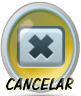
<style>
.page{position:relative;width:81px;height:96px}
.page>*{position:absolute;margin:0}
.t1{font:18px "Freehand575BT-RegularB";color:#000000;font-weight:bold}
</style>
<div class="page">
<p class="t1" style="left:6px;top:77px;width:68px;height:14px">CANCELAR</p>
</div>
